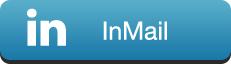
<style>
.page{position:relative;width:231px;height:64px}
.page>*{position:absolute;margin:0}
.t1{font:25px "HelveticaNeue";color:#ffffff}
</style>
<div class="page">
<p class="t1" style="left:103px;top:21px;width:64px;height:19px">InMail</p>
</div>
